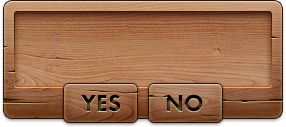
<style>
.page{position:relative;width:286px;height:127px}
.page>*{position:absolute;margin:0}
.t1{font:24px "FuturaPT-Heavy";text-transform:uppercase}
</style>
<div class="page">
<p class="t1" style="left:81px;top:94px;width:40px;height:18px">YES</p>
<p class="t1" style="left:166px;top:94px;width:37px;height:18px">NO</p>
</div>
